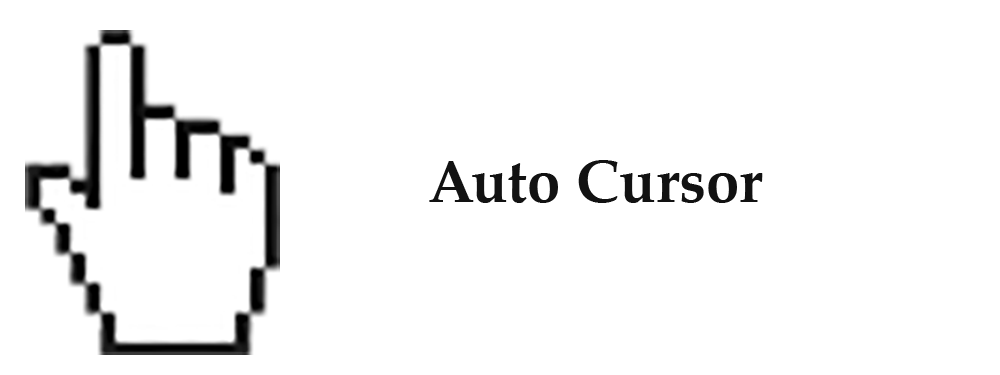
<style>
.page{position:relative;width:1000px;height:375px;background:#ffffff}
.page>*{position:absolute;margin:0}
.t1{font:60px "PalatinoLinotype-Bold";color:#121212}
</style>
<div class="page">
<p class="t1" style="left:429px;top:160px;width:334px;height:43px">Auto Cursor</p>
</div>
